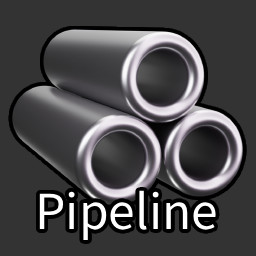
<style>
.page{position:relative;width:256px;height:256px;background:#333333}
.page>*{position:absolute;margin:0}
.t1{font:48px "NotoSansKR-Regular";color:#ffffff}
</style>
<div class="page">
<p class="t1" style="left:39px;top:190px;width:177px;height:50px">Pipeline</p>
</div>
